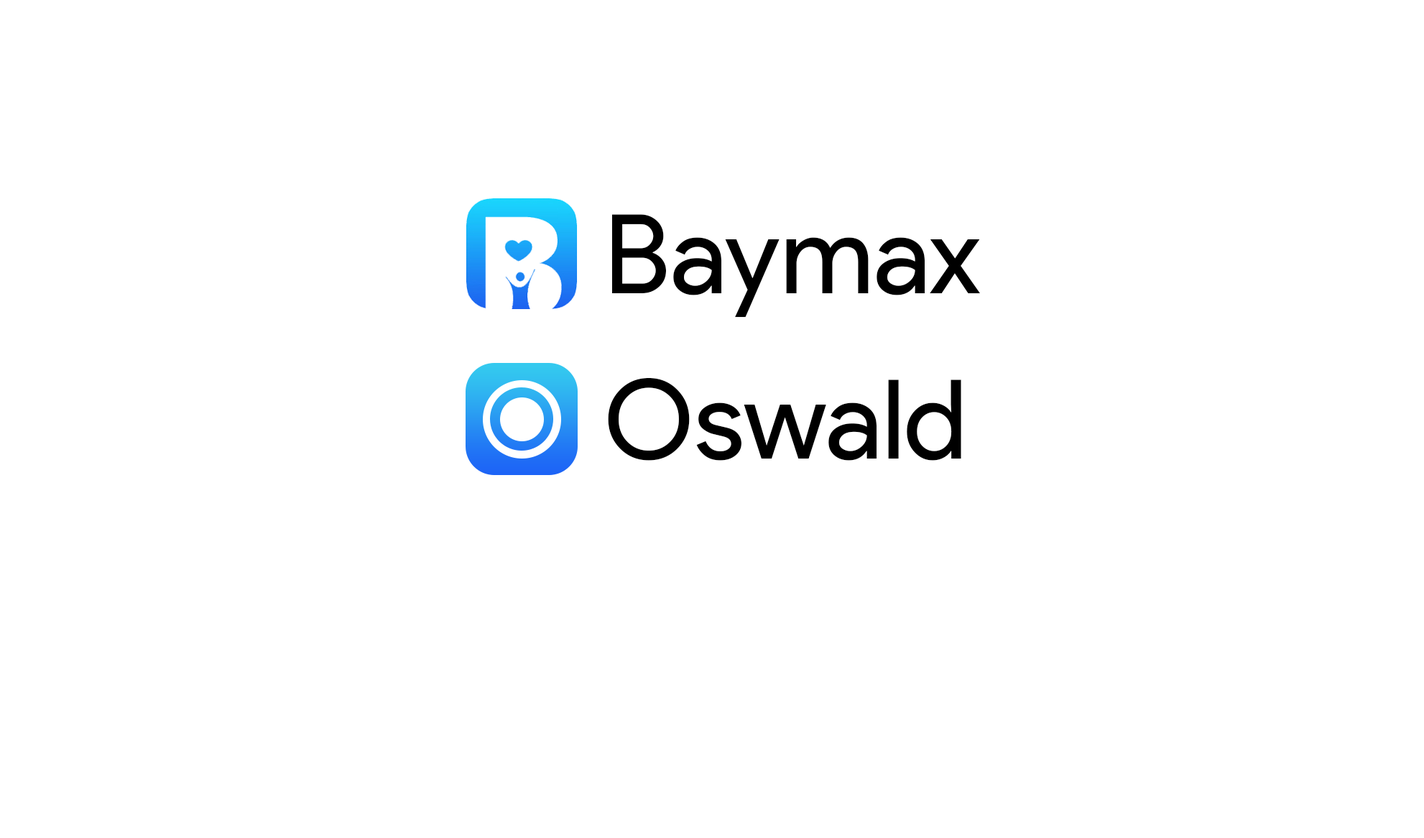
<style>
.page{position:relative;width:1424px;height:838px;background:#ffffff}
.page>*{position:absolute;margin:0}
.t1{font:110.1px "ProductSans-Regular";color:#000000}
</style>
<div class="page">
<p class="t1" style="left:612px;top:214px;width:368px;height:103px">Baymax</p>
<p class="t1" style="left:608px;top:378px;width:353px;height:82px">Oswald</p>
</div>
